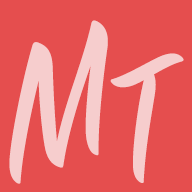
<style>
.page{position:relative;width:192px;height:192px;background:#e54e4e}
.page>*{position:absolute;margin:0}
.t1{font:200px "SignPainter-HouseScript";color:#f6cdcd}
.t2{font:180px "SignPainter-HouseScript";color:#f6cdcd}
</style>
<div class="page">
<p class="t1" style="left:9px;top:20px;width:99px;height:164px;rotate:-20deg">M</p>
<p class="t2" style="left:110px;top:53px;width:74px;height:130px;rotate:-20deg">T</p>
</div>
